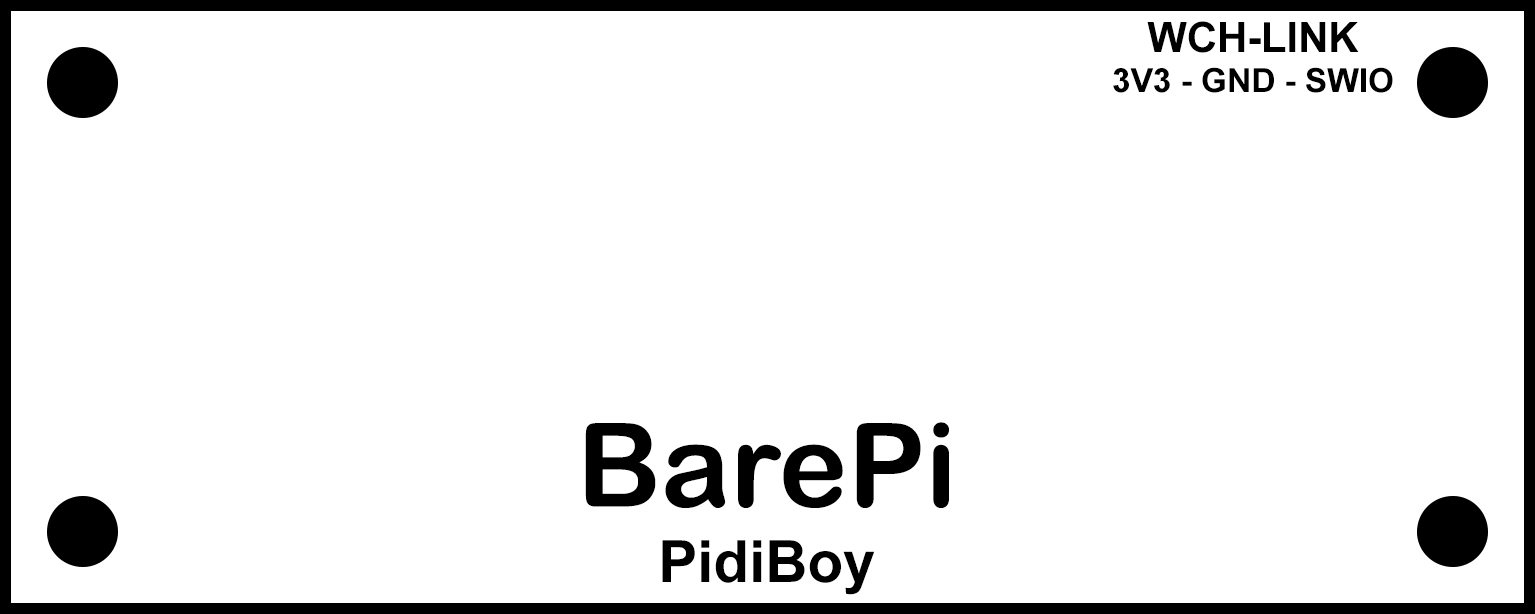
<style>
.page{position:relative;width:1535px;height:614px;background:#ffffff}
.page>*{position:absolute;margin:0}
.t1{font:33.3px "Arial-BoldMT";color:#000000}
.t2{font:41.7px "Arial-BoldMT";color:#000000}
.t3{font:116.3px "ArialRoundedMTBold";color:#000000}
.t4{font:58.3px "Arial-BoldMT";color:#000000}
</style>
<div class="page">
<p class="t1" style="left:1113px;top:21px;width:280px;height:72px;text-align:center"><span class="t2">WCH-LINK<br></span>3V3 - GND - SWIO</p>
<p class="t3" style="left:585px;top:422px;width:364px;height:86px">BarePi</p>
<p class="t4" style="left:662px;top:540px;width:213px;height:55px">PidiBoy</p>
</div>
